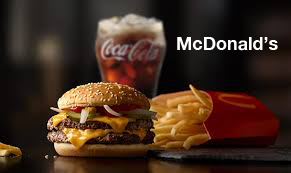
<style>
.page{position:relative;width:291px;height:173px}
.page>*{position:absolute;margin:0}
.t1{font:18px "HelveticaNeue-Bold";color:#ffffff}
</style>
<div class="page">
<p class="t1" style="left:177px;top:37px;width:101px;height:14px">McDonald’s</p>
</div>
